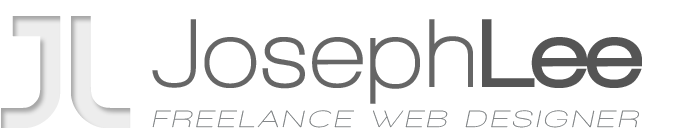
<style>
.page{position:relative;width:700px;height:140px;background:#ffffff}
.page>*{position:absolute;margin:0}
.t1{font:160px "PatinioBasica";letter-spacing:0.025em;color:#ededed}
.t2{font:100px "WalkwayBold";letter-spacing:0.025em;color:#666666}
.t3{font:100px "WalkwayBlack";letter-spacing:0.025em;color:#555555}
.t4{font:24px "WalkwayObliqueExpand";letter-spacing:0.135em;color:#737779}
</style>
<div class="page">
<p class="t1" style="left:1px;top:16px;width:130px;height:112px">JL</p>
<p class="t2" style="left:152px;top:19px;width:490px;height:85px">Joseph<span class="t3">Lee</span></p>
<p class="t4" style="left:152px;top:110px;width:487px;height:18px">FREELANCE WEB DESIGNER</p>
</div>
